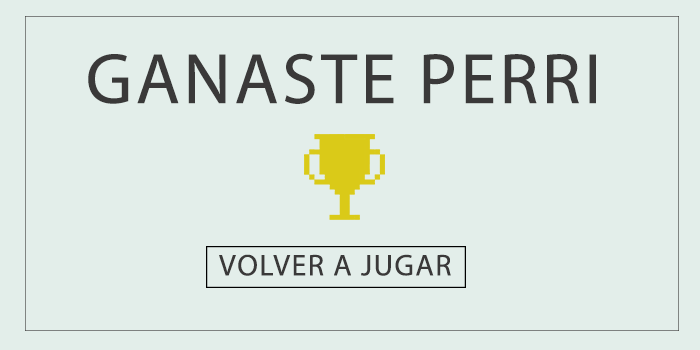
<style>
.page{position:relative;width:700px;height:350px;background:#e3eeea}
.page>*{position:absolute;margin:0}
.t1{font:72px "MyriadPro-Regular";letter-spacing:0.05em;color:#3a3939;text-transform:uppercase}
.t2{font:30px "MyriadPro-Regular";letter-spacing:0.05em;color:#3a3939;text-transform:uppercase}
</style>
<div class="page">
<p class="t1" style="left:88px;top:53px;width:508px;height:51px">Ganaste perri</p>
<p class="t2" style="left:219px;top:254px;width:232px;height:22px">volver a jugar</p>
</div>
